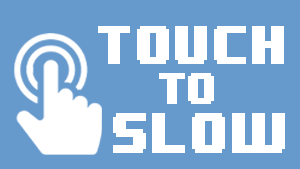
<style>
.page{position:relative;width:300px;height:169px;background:#6699cc}
.page>*{position:absolute;margin:0}
.t1{font:46.6px "8BITWONDERNominal";color:#ffffff;scale:0.83 1}
.t2{font:37.3px "8BITWONDERNominal";color:#ffffff;scale:0.83 1}
.t3{font:47.9px "8BITWONDERNominal";color:#ffffff;scale:0.83 1}
</style>
<div class="page">
<p class="t1" style="left:98px;top:26px;width:186px;height:38px">TOUCH</p>
<p class="t2" style="left:159px;top:73px;width:55px;height:31px">To</p>
<p class="t3" style="left:113px;top:113px;width:172px;height:40px">SLOW</p>
</div>
